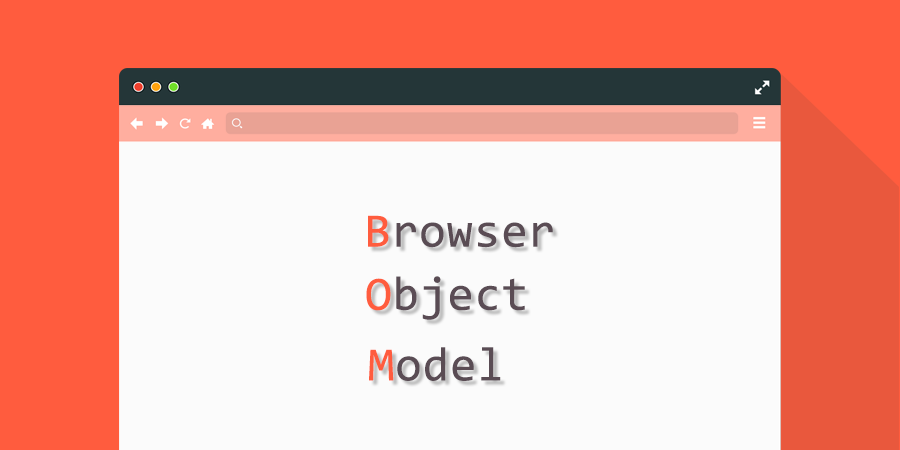
<style>
.page{position:relative;width:900px;height:450px;background:#fbfbfb}
.page>*{position:absolute;margin:0}
.t1{font:48px "Consolas";letter-spacing:0.02em;color:#5a4c54}
.t2{font:48px "Consolas";letter-spacing:0.02em;color:#ff5c3e}
</style>
<div class="page">
<p class="t1" style="left:368px;top:215px;width:185px;height:33px"><span class="t2">B</span>rowser</p>
<p class="t1" style="left:366px;top:276px;width:159px;height:44px"><span class="t2">O</span>bject</p>
<p class="t1" style="left:369px;top:347px;width:132px;height:34px"><span class="t2">M</span>odel</p>
</div>
